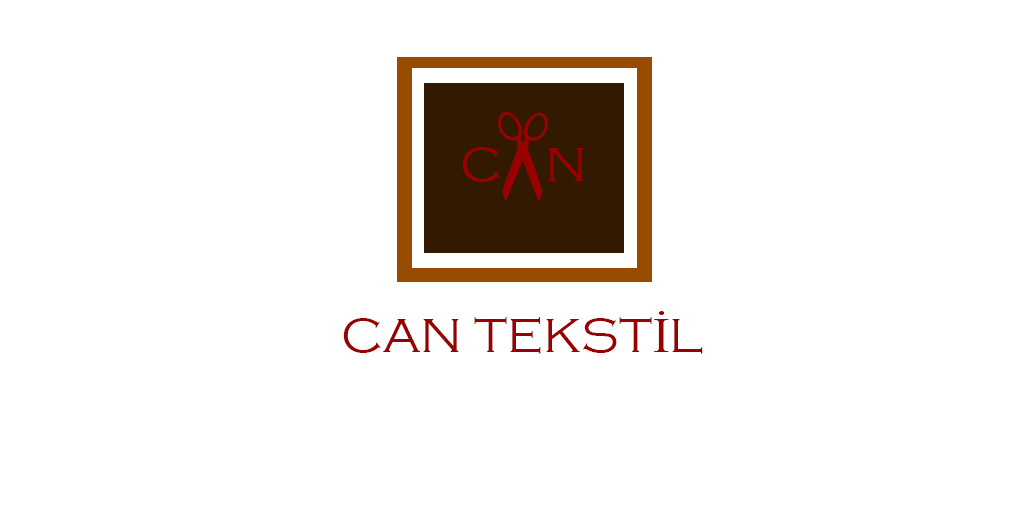
<style>
.page{position:relative;width:1024px;height:512px;background:#ffffff}
.page>*{position:absolute;margin:0}
.t1{font:50px "CopperplateGothic-Light";color:#990000}
.t2{font:50px "TimesNewRomanPSMT";color:#990000}
</style>
<div class="page">
<p class="t1" style="left:462px;top:147px;width:38px;height:35px">C</p>
<p class="t1" style="left:548px;top:148px;width:36px;height:33px">N</p>
<p class="t1" style="left:343px;top:311px;width:360px;height:43px">CAN TEKST<span class="t2">İ</span>L</p>
</div>
